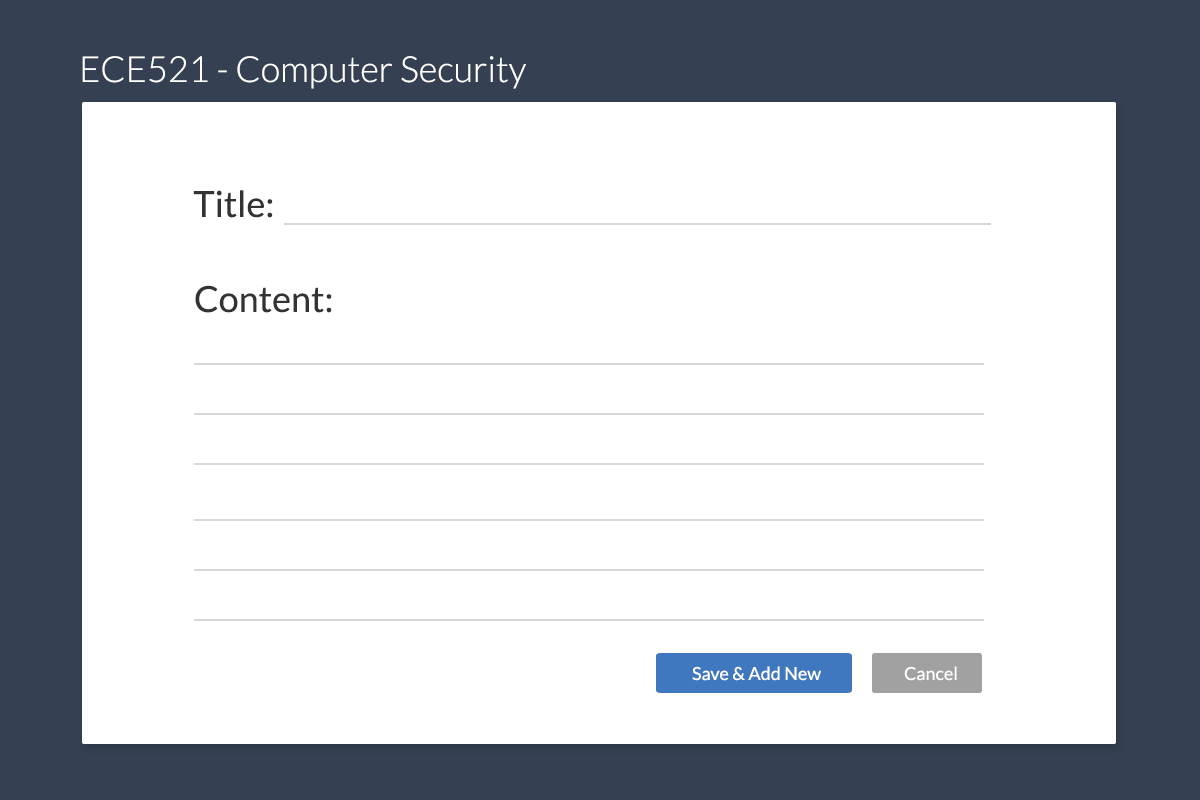
<style>
.page{position:relative;width:1200px;height:800px;background:#ffffff}
.page>*{position:absolute;margin:0}
.t1{font:36px "Lato-Light";color:#ffffff}
.t2{font:36px "Lato-Regular";color:#333333}
.t3{font:18px "Lato-Regular";color:#fefefe}
</style>
<div class="page">
<p class="t1" style="left:82px;top:56px;width:444px;height:33px">ECE521 - Computer Security</p>
<p class="t2" style="left:193px;top:190px;width:80px;height:28px">Title:</p>
<p class="t2" style="left:195px;top:285px;width:137px;height:28px">Content:</p>
<p class="t3" style="left:692px;top:666px;width:129px;height:15px">Save &amp; Add New</p>
<p class="t3" style="left:904px;top:666px;width:53px;height:15px">Cancel</p>
</div>
